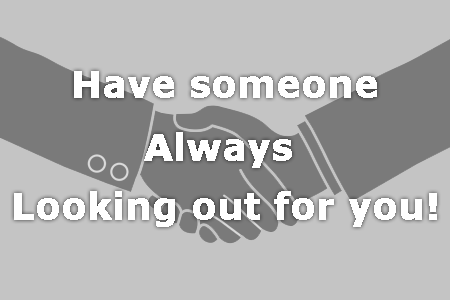
<style>
.page{position:relative;width:450px;height:300px;background:#c4c4c4}
.page>*{position:absolute;margin:0}
.t1{font:36px "Verdana-Bold";color:#ffffff;font-weight:bold}
</style>
<div class="page">
<p class="t1" style="left:74px;top:71px;width:303px;height:27px">Have someone</p>
<p class="t1" style="left:144px;top:132px;width:148px;height:36px">Always</p>
<p class="t1" style="left:14px;top:191px;width:423px;height:36px">Looking out for you!</p>
</div>
